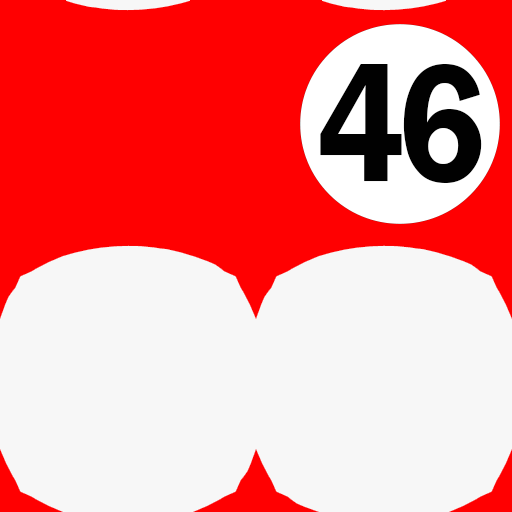
<style>
.page{position:relative;width:512px;height:512px;background:#f7f7f7}
.page>*{position:absolute;margin:0}
.t1{font:172.5px "FranklinGothic-Demi";letter-spacing:-0.05em;color:#010101;scale:0.87 1}
</style>
<div class="page">
<p class="t1" style="left:320px;top:64px;width:162px;height:119px">46</p>
</div>
